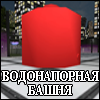
<style>
.page{position:relative;width:100px;height:100px}
.page>*{position:absolute;margin:0}
.t1{font:14px "TimesNewRomanPS-BoldMT";color:#ffffff;scale:0.82 1}
.t2{font:14px "TimesNewRomanPS-BoldMT";color:#ffffff;scale:0.84 1}
</style>
<div class="page">
<p class="t1" style="left:2px;top:71px;width:97px;height:13px">ВОДОНАПОРНАЯ</p>
<p class="t2" style="left:28px;top:85px;width:44px;height:10px">БАШНЯ</p>
</div>
